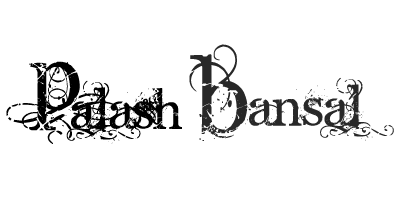
<style>
.page{position:relative;width:400px;height:200px;background:#ffffff}
.page>*{position:absolute;margin:0}
.t1{font:200px "AngelicWar";letter-spacing:0.05em;color:#282828;font-variant:small-caps}
.t2{font:200px "AngelicWar";letter-spacing:0.05em;color:#000000;font-variant:small-caps}
.t3{font:150px "AngelicWar";letter-spacing:0.05em;color:#282828;font-variant:small-caps}
.t4{font:150px "AngelicWar";letter-spacing:0.05em;color:#000000;font-variant:small-caps}
</style>
<div class="page">
<p class="t1" style="left:189px;top:44px;width:63px;height:97px">B</p>
<p class="t2" style="left:6px;top:61px;width:112px;height:83px">P</p>
<p class="t3" style="left:246px;top:77px;width:148px;height:64px">ansal</p>
<p class="t4" style="left:66px;top:80px;width:116px;height:64px">alash</p>
</div>
